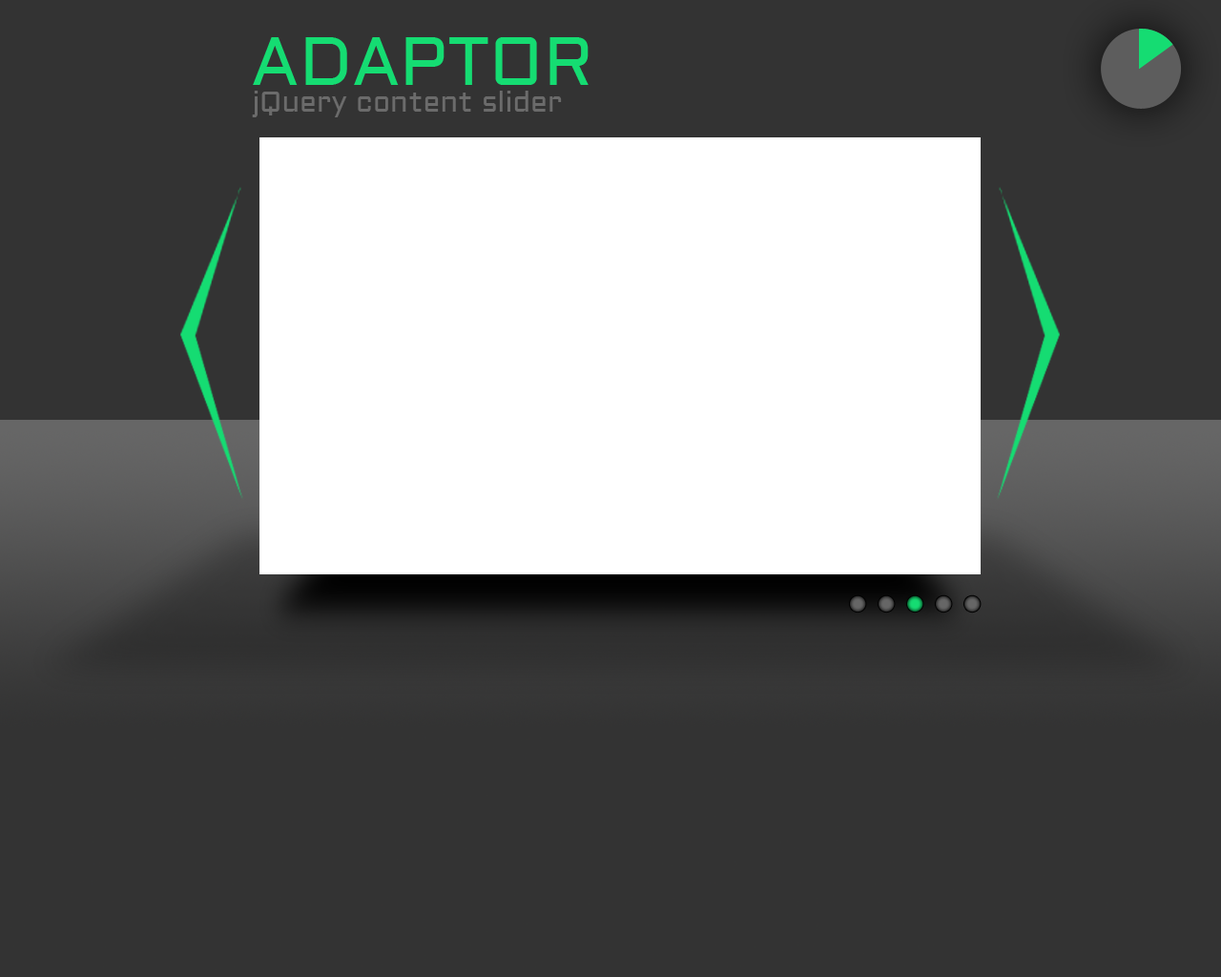
<style>
.page{position:relative;width:1221px;height:977px;background:#333333}
.page>*{position:absolute;margin:0}
.t1{font:68.7px "Aldrich";color:#15dc72}
.t2{font:28.6px "Aldrich";color:#6b6b6b}
</style>
<div class="page">
<p class="t1" style="left:253px;top:37px;width:336px;height:48px">ADAPTOR</p>
<p class="t2" style="left:252px;top:91px;width:310px;height:26px">jQuery content slider</p>
</div>
